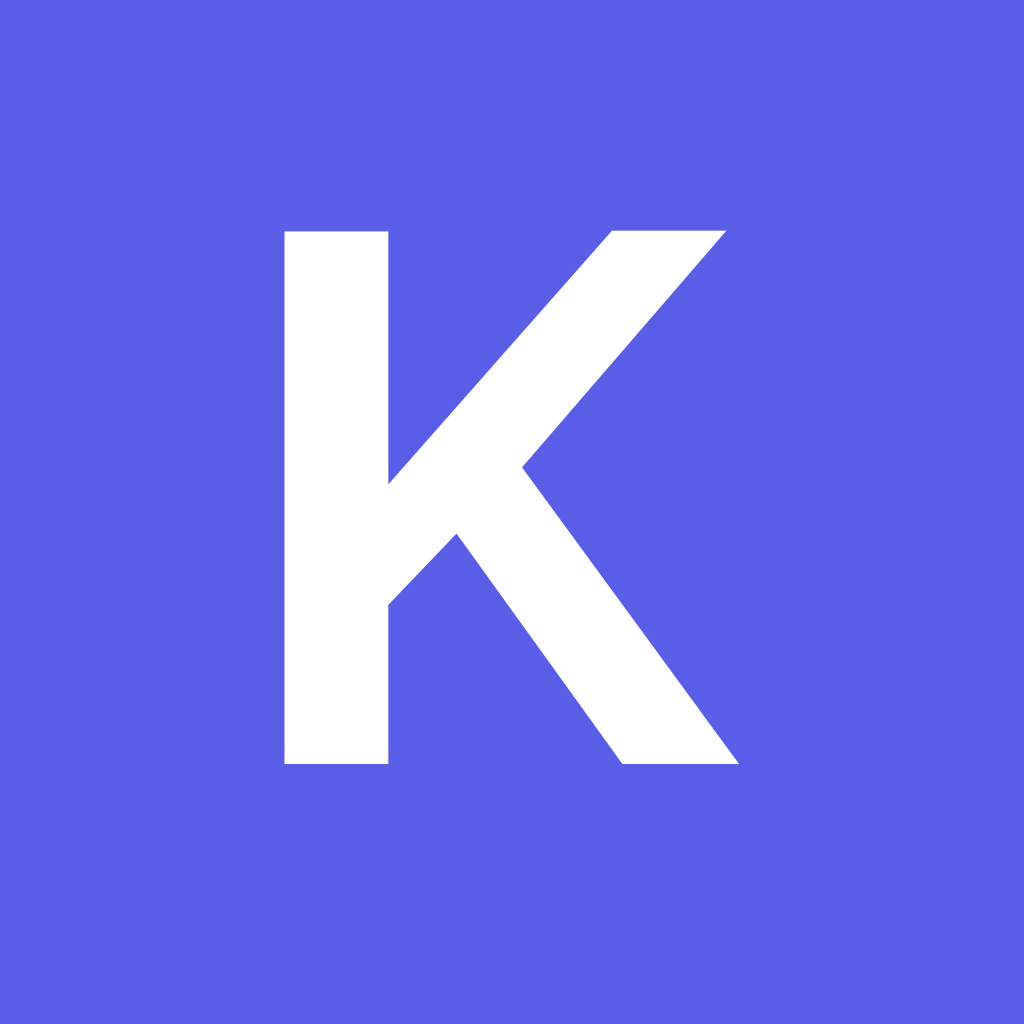
<style>
.page{position:relative;width:1024px;height:1024px;background:#595ee6}
.page>*{position:absolute;margin:0}
.t1{font:750.8px "Raleway-Bold";letter-spacing:0.004em;color:#ffffff}
</style>
<div class="page">
<p class="t1" style="left:284px;top:230px;width:455px;height:534px">K</p>
</div>
